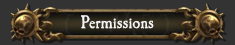
<style>
.page{position:relative;width:235px;height:45px;background:#333333}
.page>*{position:absolute;margin:0}
.t1{font:19px "CaslonAntique";color:#f5f5f5}
</style>
<div class="page">
<p class="t1" style="left:81px;top:15px;width:73px;height:14px">Permissions</p>
</div>
